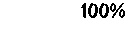
<style>
.page{position:relative;width:128px;height:32px;background:#ffffff}
.page>*{position:absolute;margin:0}
.t1{font:24px "DomCasualBT-Regular";color:#000000}
</style>
<div class="page">
<p class="t1" style="left:81px;top:3px;width:44px;height:15px">100%</p>
</div>
